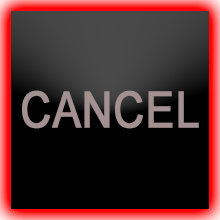
<style>
.page{position:relative;width:220px;height:220px;background:#000000}
.page>*{position:absolute;margin:0}
.t1{font:49.7px "ArialMT";color:#a49191;font-weight:bold;scale:0.86 1}
</style>
<div class="page">
<p class="t1" style="left:22px;top:90px;width:177px;height:39px">CANCEL</p>
</div>
